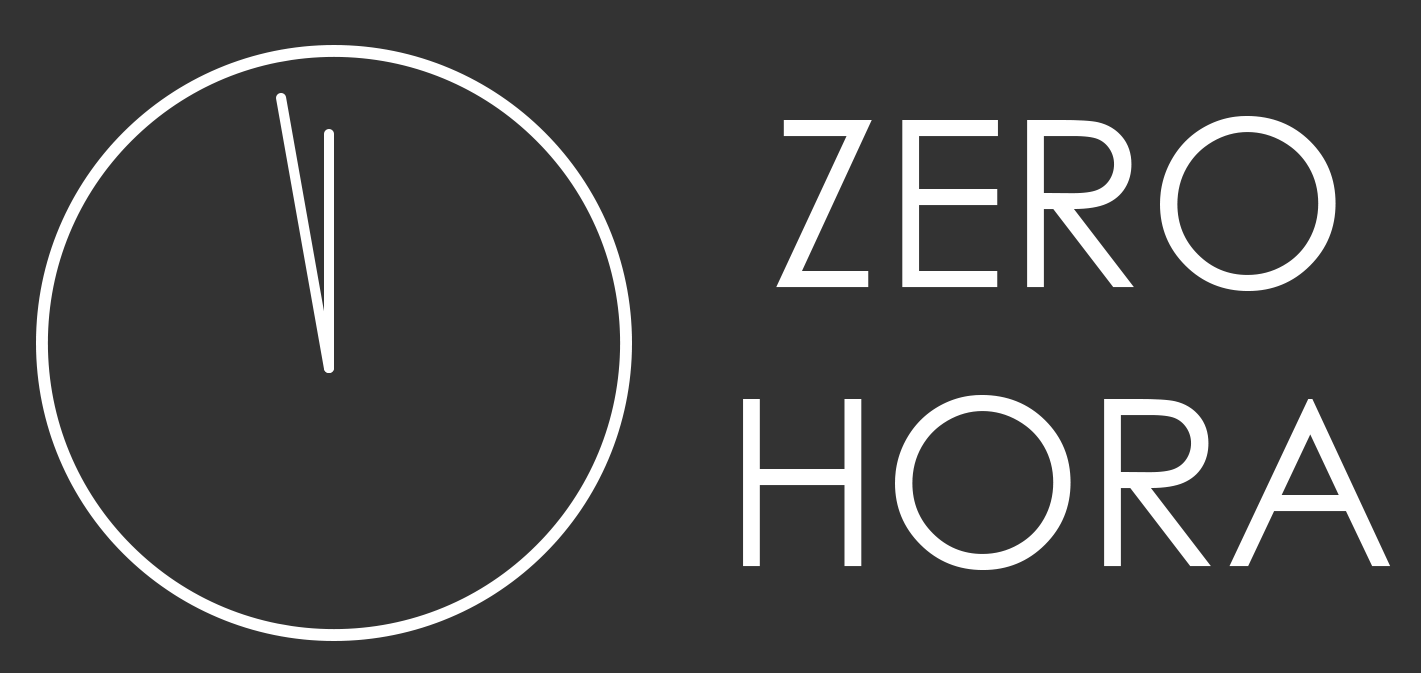
<style>
.page{position:relative;width:1421px;height:673px;background:#333333}
.page>*{position:absolute;margin:0}
.t1{font:231.9px "CenturyGothic";color:#ffffff;text-transform:uppercase}
</style>
<div class="page">
<p class="t1" style="left:743px;top:116px;width:648px;height:454px;text-align:center">zero<br>hora</p>
</div>
